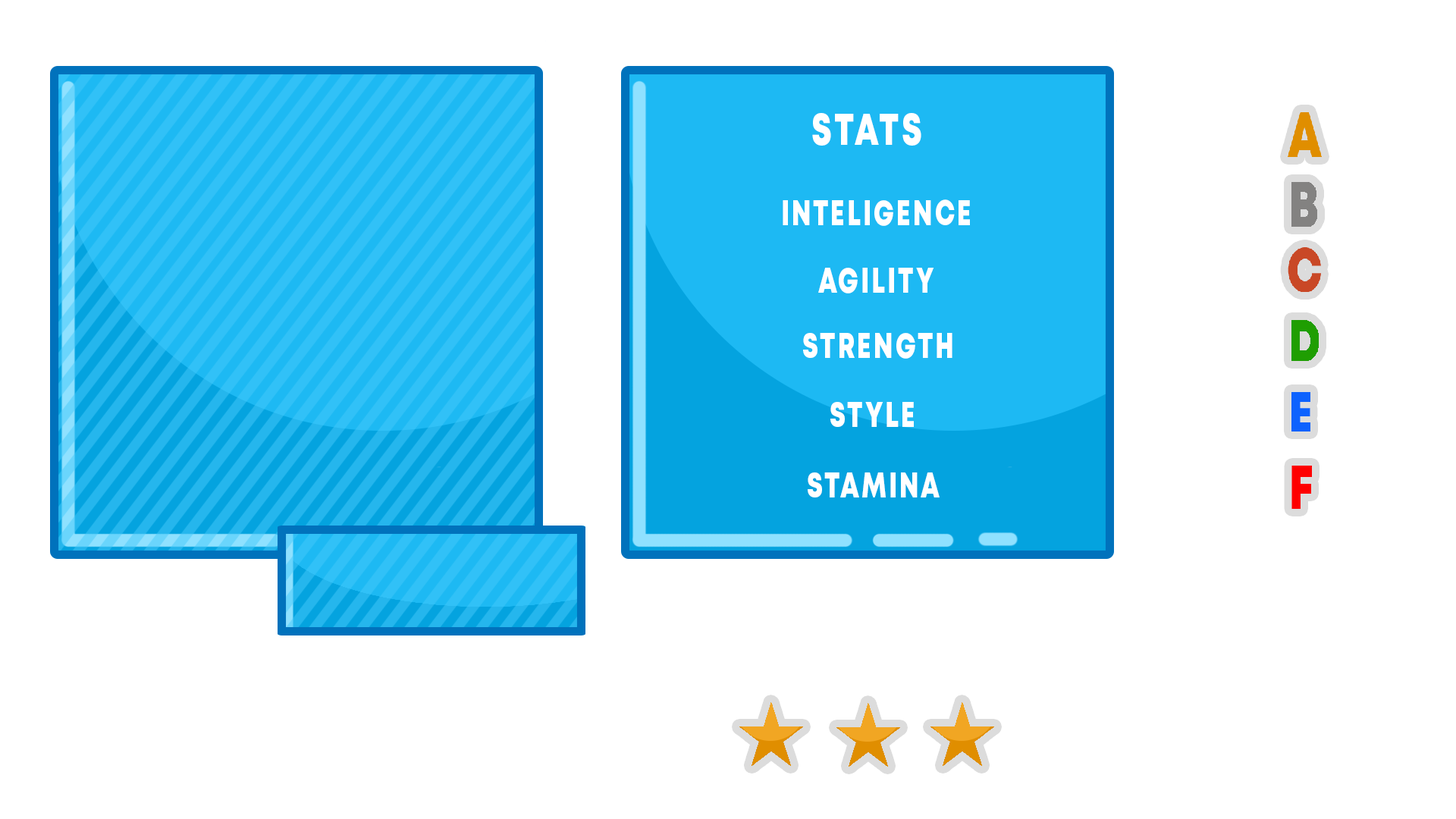
<style>
.page{position:relative;width:1456px;height:819px;background:#ffffff}
.page>*{position:absolute;margin:0}
.t1{font:44.2px "Mont-HeavyDEMO";letter-spacing:0.09em;color:#ffffff;scale:0.73 1}
.t2{font:34.8px "Mont-HeavyDEMO";letter-spacing:0.09em;color:#ffffff;scale:0.73 1}
</style>
<div class="page">
<p class="t1" style="left:812px;top:113px;width:109px;height:33px">STATS</p>
<p class="t2" style="left:783px;top:199px;width:187px;height:27px">INTELIGENCE</p>
<p class="t2" style="left:818px;top:268px;width:116px;height:25px">AGILITY</p>
<p class="t2" style="left:803px;top:333px;width:149px;height:26px">STRENGTH</p>
<p class="t2" style="left:830px;top:402px;width:84px;height:25px">STYLE</p>
<p class="t2" style="left:808px;top:472px;width:132px;height:25px">STAMINA</p>
</div>
